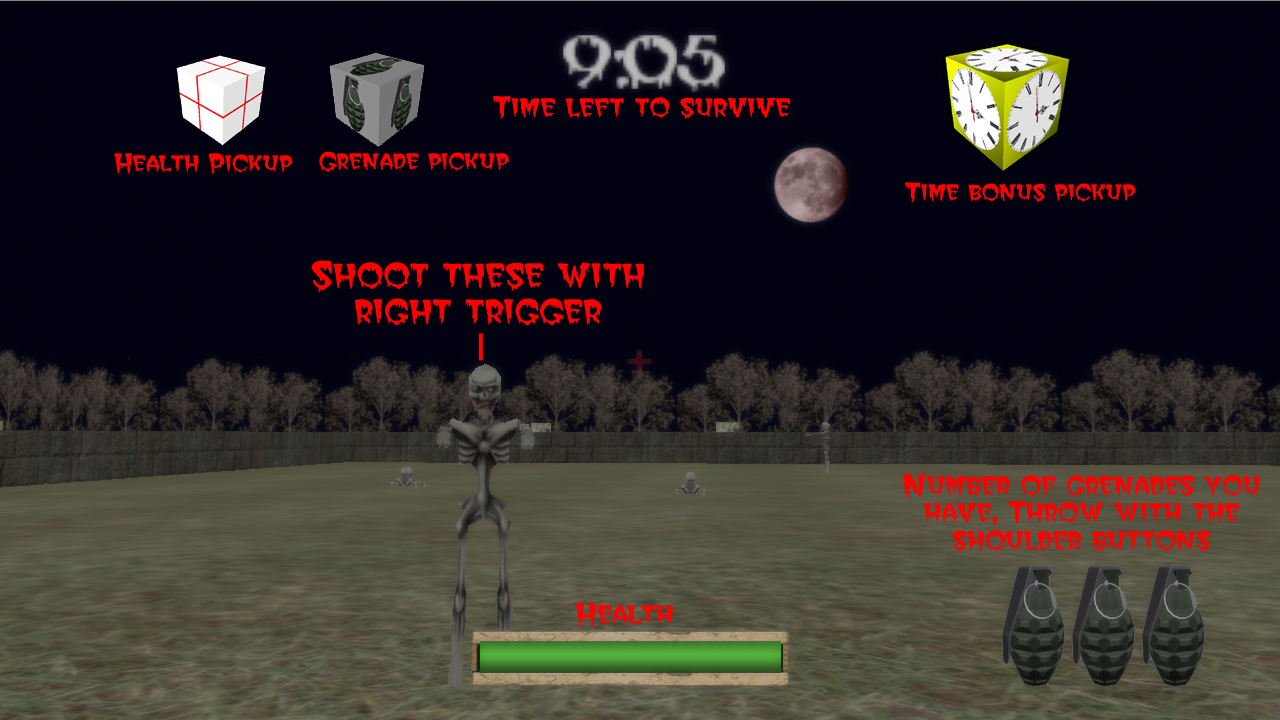
<style>
.page{position:relative;width:1280px;height:720px;background:#010110}
.page>*{position:absolute;margin:0}
.t1{font:23px "CreeperRegularSWFTE";color:#ff0000}
.t2{font:20px "CreeperRegularSWFTE";color:#ff0000}
.t3{font:30px "CreeperRegularSWFTE";color:#ff0000}
</style>
<div class="page">
<p class="t1" style="left:493px;top:96px;width:298px;height:23px">Time left to survive</p>
<p class="t2" style="left:114px;top:153px;width:179px;height:22px">Health Pickup</p>
<p class="t2" style="left:319px;top:151px;width:190px;height:21px">Grenade pickup</p>
<p class="t2" style="left:905px;top:182px;width:231px;height:21px">Time bonus pickup</p>
<p class="t3" style="left:311px;top:260px;width:333px;height:66px;text-align:center">Shoot these with right trigger</p>
<p class="t1" style="left:902px;top:474px;width:358px;height:78px;text-align:center">Number of grenades you have, Throw with the shoulder buttons</p>
<p class="t1" style="left:575px;top:603px;width:98px;height:24px">Health</p>
</div>
